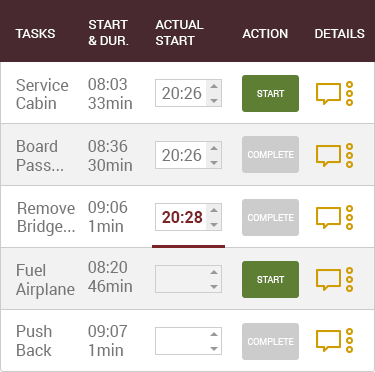
<style>
.page{position:relative;width:375px;height:372px;background:#ffffff}
.page>*{position:absolute;margin:0}
.t1{font:13px "Roboto-Regular";color:#fefefe;text-transform:uppercase}
.t2{font:13px "Roboto-Regular";color:#ffffff;text-transform:uppercase}
.t3{font:16px/18px "Roboto-Regular";color:#767676}
.t4{font:16px "Roboto-Regular";color:#767676}
.t5{font:9px "Roboto-Regular";color:#ffffff;text-transform:uppercase}
.t6{font:16px "Roboto-Bold";color:#7b2326}
</style>
<div class="page">
<p class="t1" style="left:15px;top:29px;width:40px;height:9px">tasks</p>
<p class="t2" style="left:88px;top:20px;width:41px;height:25px">Start<br>&amp; Dur.</p>
<p class="t2" style="left:155px;top:20px;width:49px;height:25px">Actual<br>Start</p>
<p class="t2" style="left:242px;top:29px;width:46px;height:9px">Action</p>
<p class="t2" style="left:315px;top:29px;width:50px;height:9px">Details</p>
<p class="t3" style="left:16px;top:78px;width:53px;height:31px">Service<br>Cabin</p>
<p class="t4" style="left:88px;top:78px;width:44px;height:31px">08:03<br>33min</p>
<p class="t4" style="left:162px;top:87px;width:40px;height:12px">20:26</p>
<p class="t5" style="left:257px;top:90px;width:28px;height:7px">start</p>
<p class="t4" style="left:17px;top:140px;width:46px;height:31px">Board<br>Pass...</p>
<p class="t4" style="left:88px;top:140px;width:44px;height:31px">08:36<br>30min</p>
<p class="t4" style="left:162px;top:149px;width:40px;height:12px">20:26</p>
<p class="t5" style="left:247px;top:151px;width:47px;height:7px">complete</p>
<p class="t3" style="left:18px;top:202px;width:57px;height:34px">Remove<br>Bridge...</p>
<p class="t4" style="left:88px;top:201px;width:40px;height:31px">09:06<br>1min</p>
<p class="t6" style="left:162px;top:211px;width:41px;height:12px">20:28</p>
<p class="t5" style="left:247px;top:214px;width:47px;height:7px">complete</p>
<p class="t4" style="left:15px;top:264px;width:60px;height:35px">Fuel<br>Airplane</p>
<p class="t4" style="left:88px;top:261px;width:44px;height:31px">08:20<br>46min</p>
<p class="t5" style="left:257px;top:276px;width:28px;height:7px">start</p>
<p class="t4" style="left:17px;top:325px;width:35px;height:31px">Push<br>Back</p>
<p class="t4" style="left:88px;top:325px;width:40px;height:31px">09:07<br>1min</p>
<p class="t5" style="left:247px;top:338px;width:47px;height:7px">complete</p>
</div>
